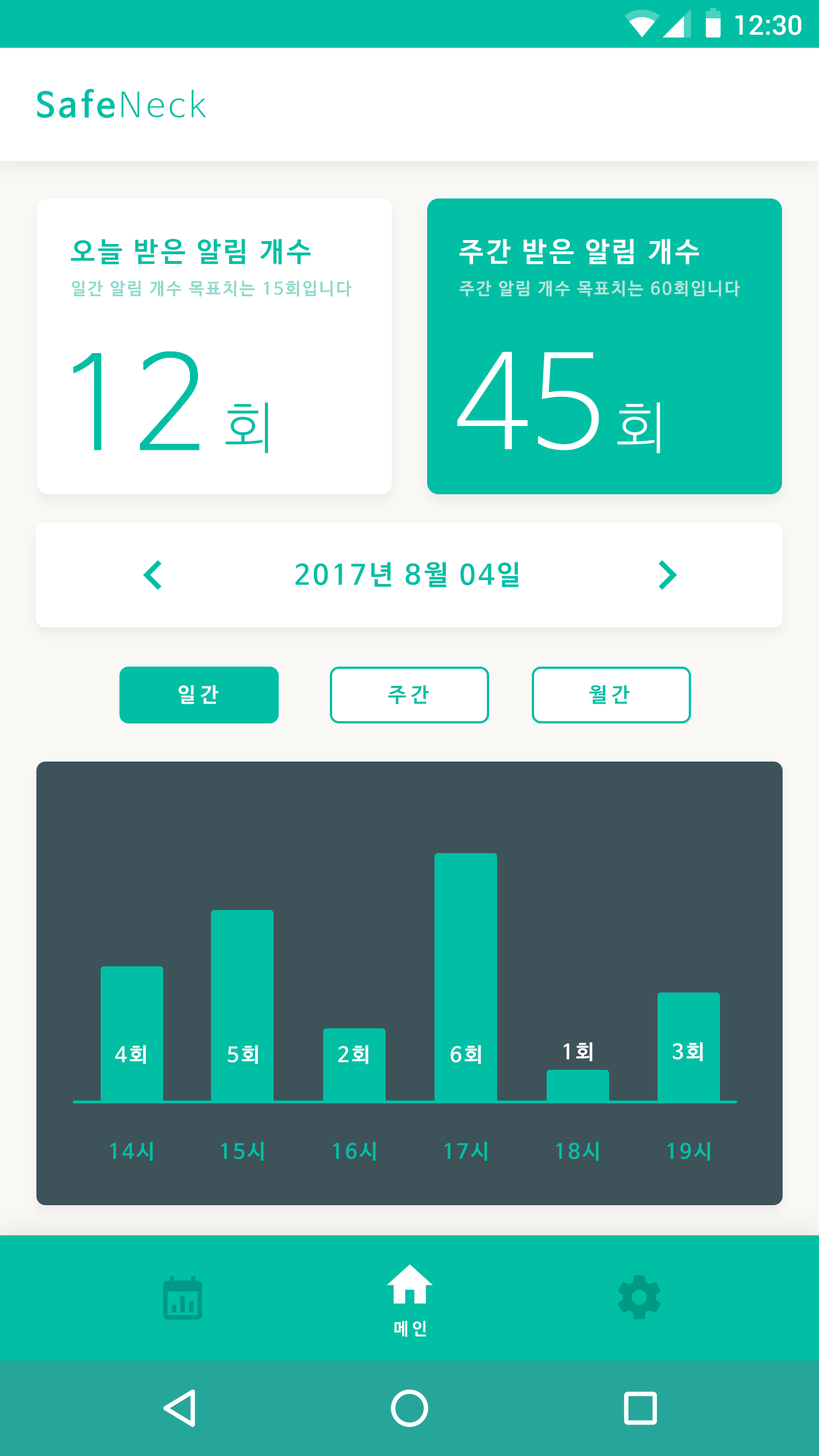
<style>
.page{position:relative;width:819px;height:1456px;background:#ffffff}
.page>*{position:absolute;margin:0}
.t1{font:27.3px "Roboto-Medium";color:#ffffff}
.t2{font:34.1px "NanumBarunGothicBold";letter-spacing:0.1em;color:#00bfa5}
.t3{font:34.1px "NanumBarunGothicLight";letter-spacing:0.1em;color:#00bfa5}
.t4{font:27.3px "NanumBarunGothicBold";letter-spacing:0.1em;color:#00bfa5}
.t5{font:27.3px "NanumBarunGothicBold";letter-spacing:0.1em;color:#ffffff}
.t6{font:17.1px "NanumBarunGothicBold";letter-spacing:0.1em;color:#8ddacc}
.t7{font:17.1px "NanumBarunGothicBold";letter-spacing:0.1em;color:#b7e6dd}
.t8{font:129.1px "NanumBarunGothicLight";color:#00bfa5}
.t9{font:129.1px "NanumBarunGothicLight";color:#ffffff}
.t10{font:55.7px "NanumBarunGothicLight";color:#00bfa5}
.t11{font:55.7px "NanumBarunGothicLight";color:#ffffff}
.t12{font:20.5px "NanumBarunGothicBold";letter-spacing:0.2em;color:#ffffff}
.t13{font:20.5px "NanumBarunGothicBold";letter-spacing:0.2em;color:#00bfa5}
.t14{font:20.5px "NanumBarunGothicBold";letter-spacing:0.1em;color:#ffffff}
.t15{font:20.5px "NanumBarunGothicBold";letter-spacing:0.1em;color:#00bfa5}
.t16{font:17px "NanumBarunGothicBold";letter-spacing:0.2em;color:#ffffff}
</style>
<div class="page">
<p class="t1" style="left:735px;top:15px;width:66px;height:20px">12:30</p>
<p class="t2" style="left:37px;top:89px;width:169px;height:29px">Safe<span class="t3">Neck</span></p>
<p class="t4" style="left:71px;top:239px;width:240px;height:25px">오늘 받은 알림 개수</p>
<p class="t5" style="left:460px;top:239px;width:239px;height:25px">주간 받은 알림 개수</p>
<p class="t6" style="left:72px;top:280px;width:279px;height:17px">일간 알림 개수 목표치는 15회입니다</p>
<p class="t7" style="left:460px;top:280px;width:280px;height:17px">주간 알림 개수 목표치는 60회입니다</p>
<p class="t8" style="left:73px;top:351px;width:127px;height:99px">12</p>
<p class="t9" style="left:457px;top:351px;width:142px;height:99px">45</p>
<p class="t10" style="left:225px;top:402px;width:43px;height:51px">회</p>
<p class="t11" style="left:617px;top:402px;width:43px;height:51px">회</p>
<p class="t4" style="left:295px;top:562px;width:224px;height:26px">2017년 8월 04일</p>
<p class="t12" style="left:179px;top:685px;width:39px;height:19px">일간</p>
<p class="t13" style="left:388px;top:685px;width:41px;height:19px">주간</p>
<p class="t13" style="left:589px;top:685px;width:41px;height:19px">월간</p>
<p class="t14" style="left:115px;top:1045px;width:31px;height:19px">4회</p>
<p class="t14" style="left:227px;top:1045px;width:31px;height:19px">5회</p>
<p class="t14" style="left:338px;top:1045px;width:31px;height:19px">2회</p>
<p class="t14" style="left:450px;top:1045px;width:31px;height:19px">6회</p>
<p class="t14" style="left:564px;top:1042px;width:29px;height:19px">1회</p>
<p class="t14" style="left:673px;top:1042px;width:30px;height:19px">3회</p>
<p class="t15" style="left:110px;top:1141px;width:43px;height:20px">14시</p>
<p class="t15" style="left:221px;top:1141px;width:43px;height:20px">15시</p>
<p class="t15" style="left:333px;top:1141px;width:43px;height:20px">16시</p>
<p class="t15" style="left:445px;top:1141px;width:42px;height:20px">17시</p>
<p class="t15" style="left:556px;top:1141px;width:43px;height:20px">18시</p>
<p class="t15" style="left:668px;top:1141px;width:42px;height:20px">19시</p>
<p class="t16" style="left:394px;top:1321px;width:32px;height:16px">메인</p>
</div>
